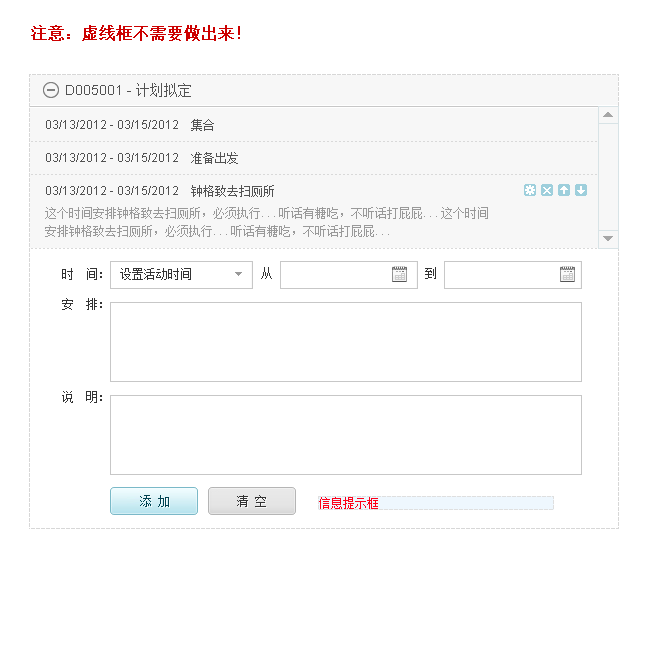
<style>
.page{position:relative;width:654px;height:664px;background:#ffffff}
.page>*{position:absolute;margin:0}
.t1{font:16px "SimSun";color:#cc0000;font-weight:bold}
.t2{font:14px "ArialMT";color:#525252}
.t3{font:14px "SimSun";color:#525252}
.t4{font:12px "ArialMT";color:#525252}
.t5{font:12px "SimSun";color:#525252}
.t6{font:12px/18px "SimSun";color:#999999}
.t7{font:12px "SimSun";color:#333333}
</style>
<div class="page">
<p class="t1" style="left:31px;top:25px;width:209px;height:16px">注意：虚线框不需要做出来！</p>
<p class="t2" style="left:66px;top:83px;width:125px;height:14px">D005001 - <span class="t3">计划拟定</span></p>
<p class="t4" style="left:46px;top:119px;width:168px;height:12px">03/13/2012 - 03/15/2012    <span class="t5">集合</span></p>
<p class="t4" style="left:46px;top:152px;width:192px;height:12px">03/13/2012 - 03/15/2012    <span class="t5">准备出发</span></p>
<p class="t4" style="left:46px;top:185px;width:228px;height:12px">03/13/2012 - 03/15/2012    <span class="t5">钟格致去扫厕所</span></p>
<p class="t6" style="left:45px;top:207px;width:443px;height:30px">这个时间安排钟格致去扫厕所，必须执行...听话有糖吃，不听话打屁屁...这个时间安排钟格致去扫厕所，必须执行...听话有糖吃，不听话打屁屁...</p>
<p class="t7" style="left:62px;top:268px;width:40px;height:12px">时  间：</p>
<p class="t7" style="left:120px;top:268px;width:71px;height:12px">设置活动时间</p>
<p class="t7" style="left:261px;top:267px;width:11px;height:12px">从</p>
<p class="t7" style="left:425px;top:267px;width:11px;height:12px">到</p>
<p class="t7" style="left:62px;top:298px;width:40px;height:12px">安  排：</p>
<p class="t7" style="left:62px;top:391px;width:40px;height:12px">说  明：</p>
</div>
